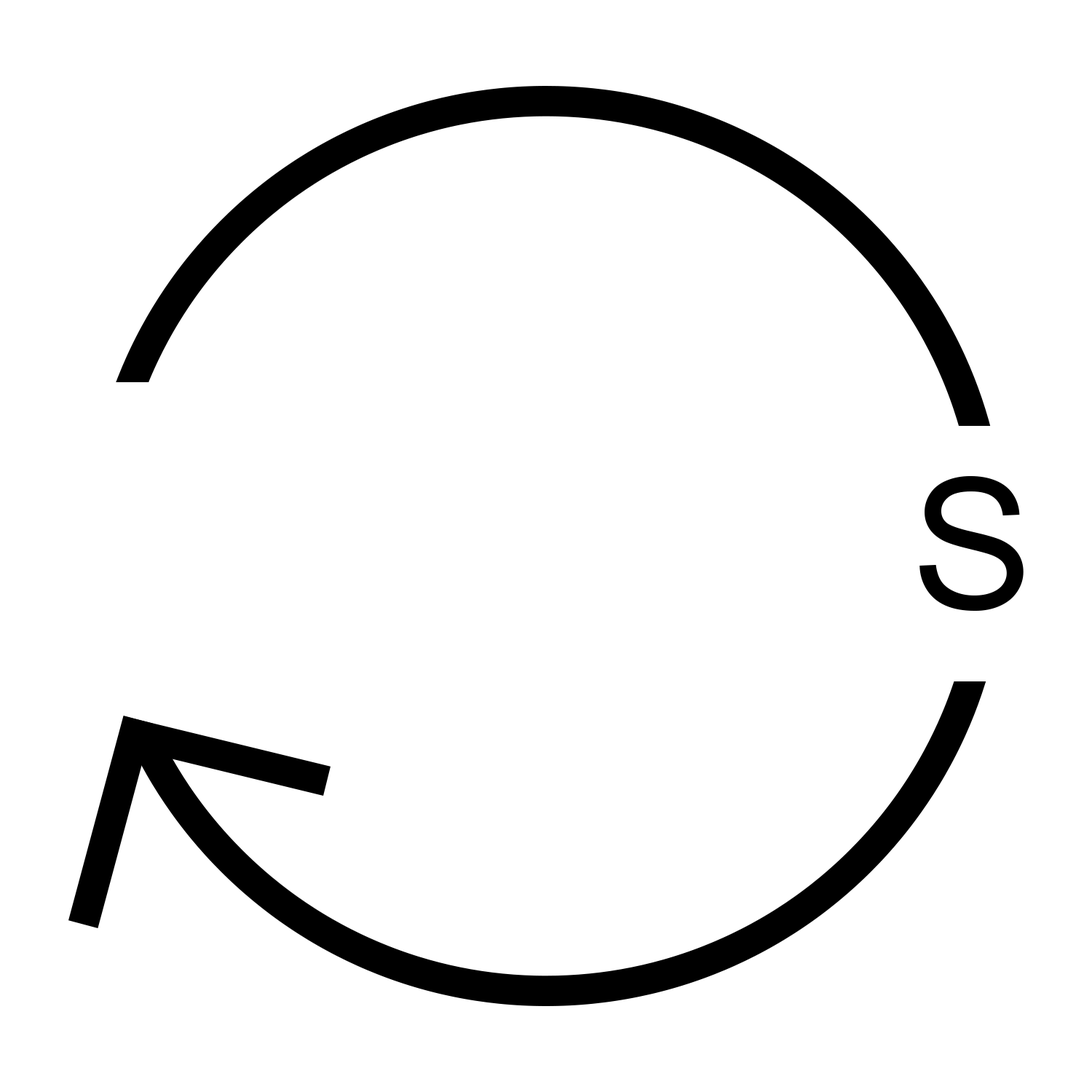
<style>
.page{position:relative;width:1092px;height:1092px;background:#ffffff}
.page>*{position:absolute;margin:0}
.t1{font:182px "ArialMT";color:#000000}
</style>
<div class="page">
<p class="t1" style="left:919px;top:476px;width:105px;height:135px">S</p>
</div>
